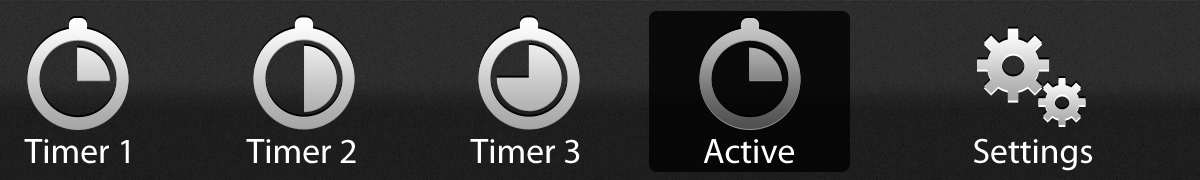
<style>
.page{position:relative;width:1200px;height:180px}
.page>*{position:absolute;margin:0}
.t1{font:35.5px "MyriadPro-Regular";color:#ffffff}
</style>
<div class="page">
<p class="t1" style="left:24px;top:139px;width:105px;height:25px">Timer 1</p>
<p class="t1" style="left:246px;top:139px;width:110px;height:25px">Timer 2</p>
<p class="t1" style="left:470px;top:139px;width:110px;height:25px">Timer 3</p>
<p class="t1" style="left:703px;top:139px;width:91px;height:25px">Active</p>
<p class="t1" style="left:974px;top:138px;width:118px;height:33px">Settings</p>
</div>
